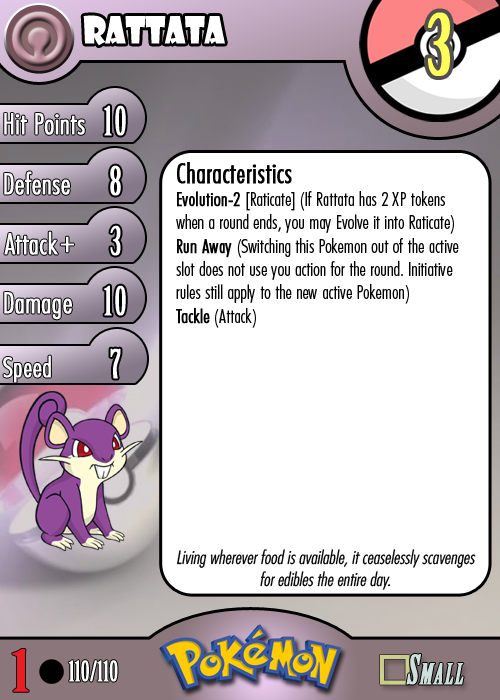
<style>
.page{position:relative;width:500px;height:700px;background:#ffffff}
.page>*{position:absolute;margin:0}
.t1{font:36.7px "ShowcardGothic-Reg";letter-spacing:-0.025em;color:#ffffff;scale:0.91 1}
.t2{font:83.3px "BirchStd";letter-spacing:0.025em;color:#fffd59;font-weight:bold}
.t3{font:27.8px "Futura-CondensedLight";color:#ffffff;font-weight:bold}
.t4{font:38.9px "BirchStd";letter-spacing:0.035em;color:#ffffff;font-weight:bold}
.t5{font:19.4px "FuturaCondensedBQ-Light";color:#010101}
.t6{font:27.8px "FuturaCondensedBQ-Light";color:#010101;font-weight:bold}
.t7{font:19.4px "FuturaCondensedBQ-Light";color:#010101;font-weight:bold}
.t8{font:30.6px "Futura-CondensedLight";color:#ffffff;font-weight:bold}
.t9{font:27.8px "FuturaCondensedBQ-Light";color:#ffffff;font-weight:bold}
.t10{font:18.1px "Futura-CondensedLight";color:#010101;font-style:italic}
.t11{font:55.6px "BirchStd";color:#ed1c24;font-weight:bold;scale:1.5 1}
.t12{font:27.8px "BirchStd";color:#ffffff;font-weight:bold}
</style>
<div class="page">
<p class="t1" style="left:83px;top:15px;width:142px;height:31px">rattata</p>
<p class="t2" style="left:428px;top:12px;width:22px;height:64px">3</p>
<p class="t3" style="left:4px;top:113px;width:81px;height:22px">Hit Points</p>
<p class="t4" style="left:104px;top:105px;width:22px;height:31px">10</p>
<p class="t3" style="left:4px;top:171px;width:66px;height:24px">Defense</p>
<p class="t4" style="left:110px;top:165px;width:11px;height:31px">8</p>
<p class="t5" style="left:176px;top:162px;width:283px;height:166px"><span class="t6">Characteristics<br></span><span class="t7">Evolution-2 </span>[Raticate] (If Rattata has 2 XP tokens when a round ends, you may Evolve it into Raticate)<br><span class="t7">Run Away</span> (Switching this Pokemon out of the active slot does not use you action for the round. Initiative rules still apply to the new active Pokemon)<br><span class="t7">Tackle</span> (Attack)</p>
<p class="t3" style="left:4px;top:231px;width:54px;height:24px">Attack</p>
<p class="t4" style="left:110px;top:225px;width:11px;height:31px">3</p>
<p class="t8" style="left:60px;top:236px;width:14px;height:17px">+</p>
<p class="t3" style="left:4px;top:292px;width:68px;height:28px">Damage</p>
<p class="t4" style="left:104px;top:285px;width:22px;height:31px">10</p>
<p class="t4" style="left:110px;top:348px;width:11px;height:31px">7</p>
<p class="t9" style="left:3px;top:355px;width:48px;height:28px">Speed</p>
<p class="t10" style="left:177px;top:549px;width:299px;height:41px;text-align:center">Living wherever food is available, it ceaselessly scavenges for edibles the entire day.</p>
<p class="t11" style="left:12px;top:649px;width:17px;height:43px">1</p>
<p class="t12" style="left:68px;top:660px;width:50px;height:22px">110/110</p>
</div>
